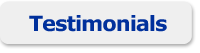
<style>
.page{position:relative;width:200px;height:53px;background:#efefef}
.page>*{position:absolute;margin:0}
.t1{font:21px "Verdana-Bold";letter-spacing:-0.05em;color:#00309c}
</style>
<div class="page">
<p class="t1" style="left:29px;top:15px;width:138px;height:17px">Testimonials</p>
</div>
